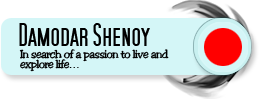
<style>
.page{position:relative;width:259px;height:99px;background:#d4f6f7}
.page>*{position:absolute;margin:0}
.t1{font:30px "SFMoviePoster";letter-spacing:-0.05em;color:#000000}
.t2{font:11px/10px "Toledo";letter-spacing:-0.05em;color:#000000}
.t3{font:11px/10px "TimesNewRomanPSMT";letter-spacing:-0.05em;color:#000000}
</style>
<div class="page">
<p class="t1" style="left:19px;top:23px;width:131px;height:23px">Damodar Shenoy</p>
<p class="t2" style="left:19px;top:49px;width:150px;height:23px">In search of a passion to live and <br>explore life<span class="t3">…</span></p>
</div>
